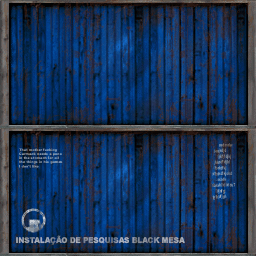
<style>
.page{position:relative;width:256px;height:256px}
.page>*{position:absolute;margin:0}
.t1{font:8px "Arial-Black";scale:0.9 1}
</style>
<div class="page">
<p class="t1" style="left:16px;top:235px;width:169px;height:10px">INSTALAÇÃO DE PESQUISAS BLACK MESA</p>
</div>
